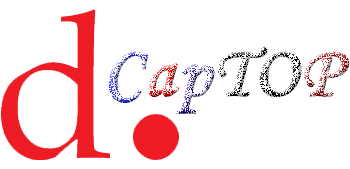
<style>
.page{position:relative;width:350px;height:169px;background:#ffffff}
.page>*{position:absolute;margin:0}
.t1{font:72px "MonotypeCorsiva";letter-spacing:0.025em;font-weight:bold}
</style>
<div class="page">
<p class="t1" style="left:108px;top:46px;width:242px;height:69px">CapTOP</p>
</div>
